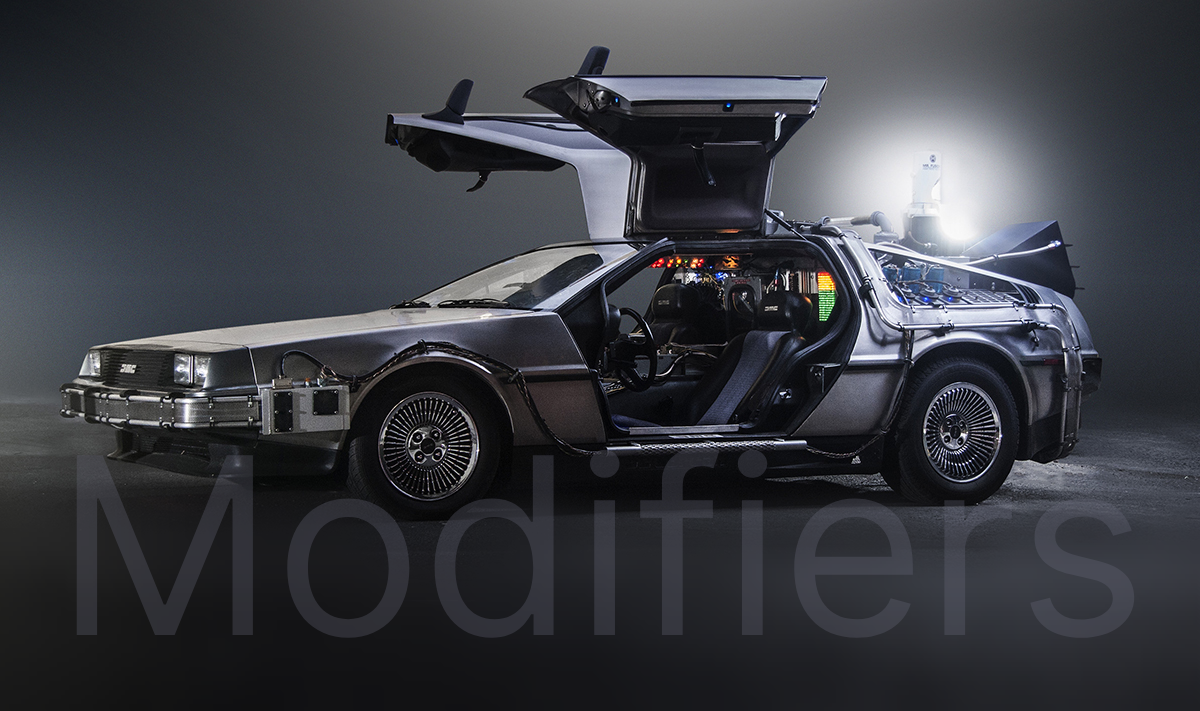
<style>
.page{position:relative;width:1200px;height:711px}
.page>*{position:absolute;margin:0}
.t1{font:247px "Inter-Regular";color:#36373d}
</style>
<div class="page">
<p class="t1" style="left:76px;top:446px;width:1059px;height:192px">Modifiers</p>
</div>
